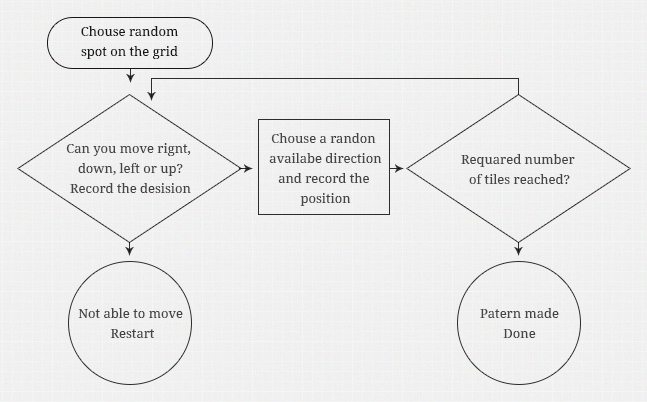
<style>
.page{position:relative;width:647px;height:402px}
.page>*{position:absolute;margin:0}
.t1{font:13px/20px "NotoSerif";color:#000000}
.t2{font:13px/20px "NotoSerif";color:#434343}
.t3{font:13px/20px "NotoSerif";color:#434344}
.t4{font:13px/20px "NotoSerif";color:#444444}
.t5{font:13px/20px "NotoSerif";color:#444344}
</style>
<div class="page">
<p class="t1" style="left:81px;top:26px;width:97px;height:33px;text-align:center">Chouse random<br>spot on the grid</p>
<p class="t2" style="left:269px;top:133px;width:113px;height:73px;text-align:center">Chouse a randon <br>availabe direction<br>and record the <br>position</p>
<p class="t3" style="left:66px;top:143px;width:125px;height:50px;text-align:center">Can you move rignt, <br>down, left or up?<br>Record the desision</p>
<p class="t2" style="left:461px;top:154px;width:114px;height:30px;text-align:center">Requared number <br>of tiles reached?</p>
<p class="t4" style="left:78px;top:308px;width:105px;height:30px;text-align:center">Not able to move <br>Restart</p>
<p class="t5" style="left:480px;top:308px;width:79px;height:30px;text-align:center">Patern made<br>Done</p>
</div>
